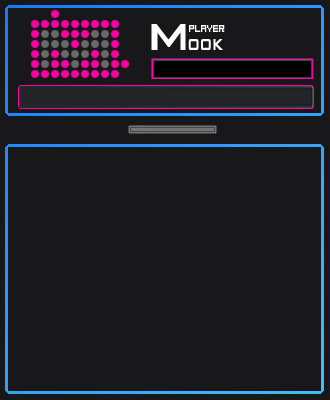
<style>
.page{position:relative;width:330px;height:400px;background:#18181a}
.page>*{position:absolute;margin:0}
.t1{font:50px "BankGothicBT-Medium";letter-spacing:-0.05em;color:#ffffff}
.t2{font:8.4px "04b08";color:#ffffff;scale:0.71 1}
.t3{font:21px "BankGothicBT-Medium";letter-spacing:-0.06em;color:#ffffff;scale:0.71 1}
</style>
<div class="page">
<p class="t1" style="left:151px;top:24px;width:35px;height:26px;rotate:180deg">M</p>
<p class="t2" style="left:189px;top:25px;width:36px;height:7px">Player</p>
<p class="t3" style="left:188px;top:39px;width:35px;height:11px">OOK</p>
</div>
